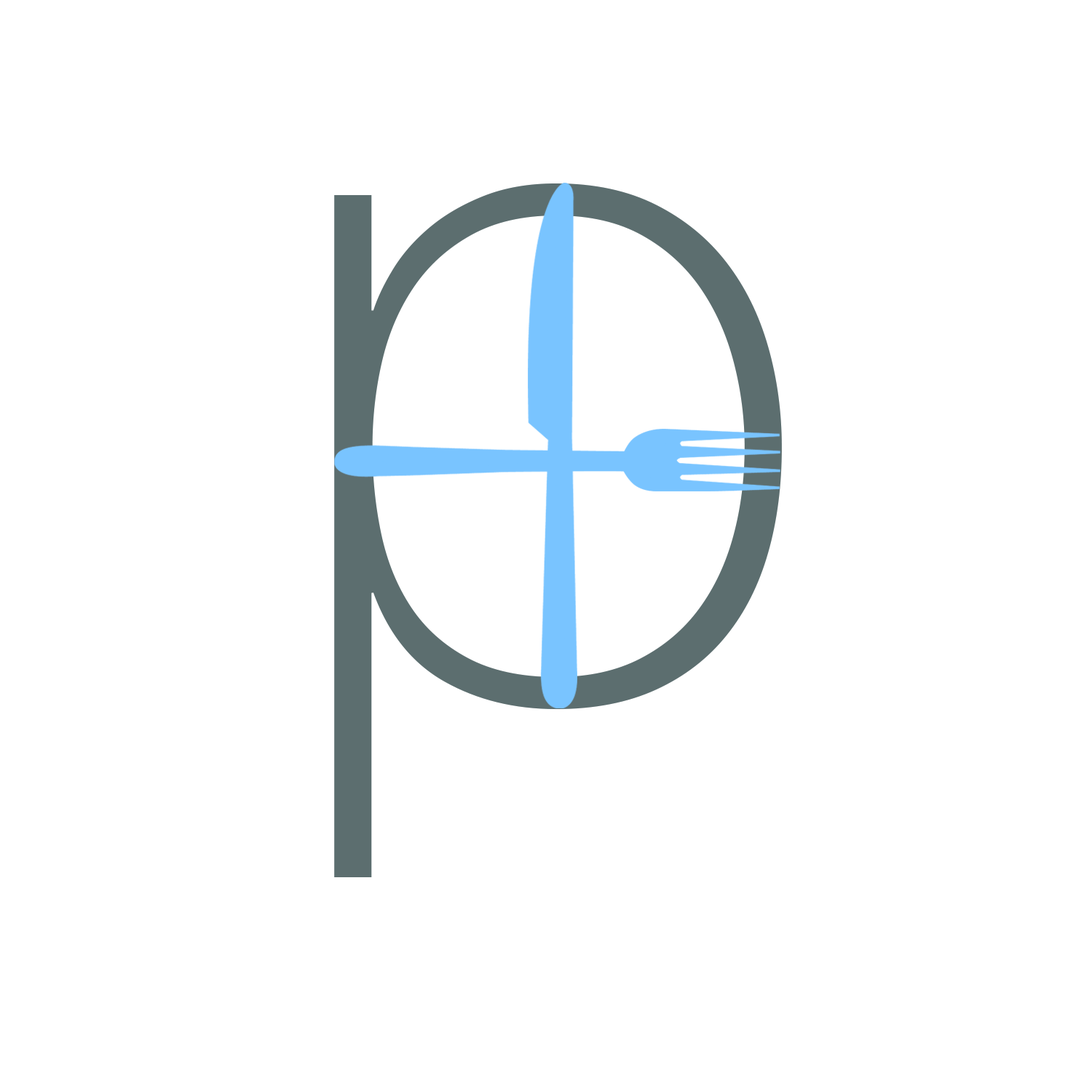
<style>
.page{position:relative;width:1092px;height:1092px;background:#ffffff}
.page>*{position:absolute;margin:0}
.t1{font:977.2px "HelveticaNeue-Thin";color:#5c6e6f}
</style>
<div class="page">
<p class="t1" style="left:334px;top:183px;width:448px;height:694px">p</p>
</div>
